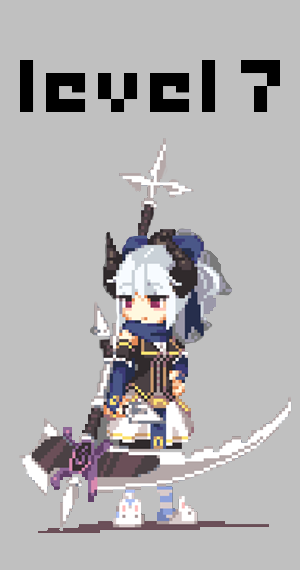
<style>
.page{position:relative;width:300px;height:570px;background:#c0c0c0}
.page>*{position:absolute;margin:0}
.t1{font:104px "game-over";color:#000000}
</style>
<div class="page">
<p class="t1" style="left:20px;top:60px;width:260px;height:52px">level 7</p>
</div>
